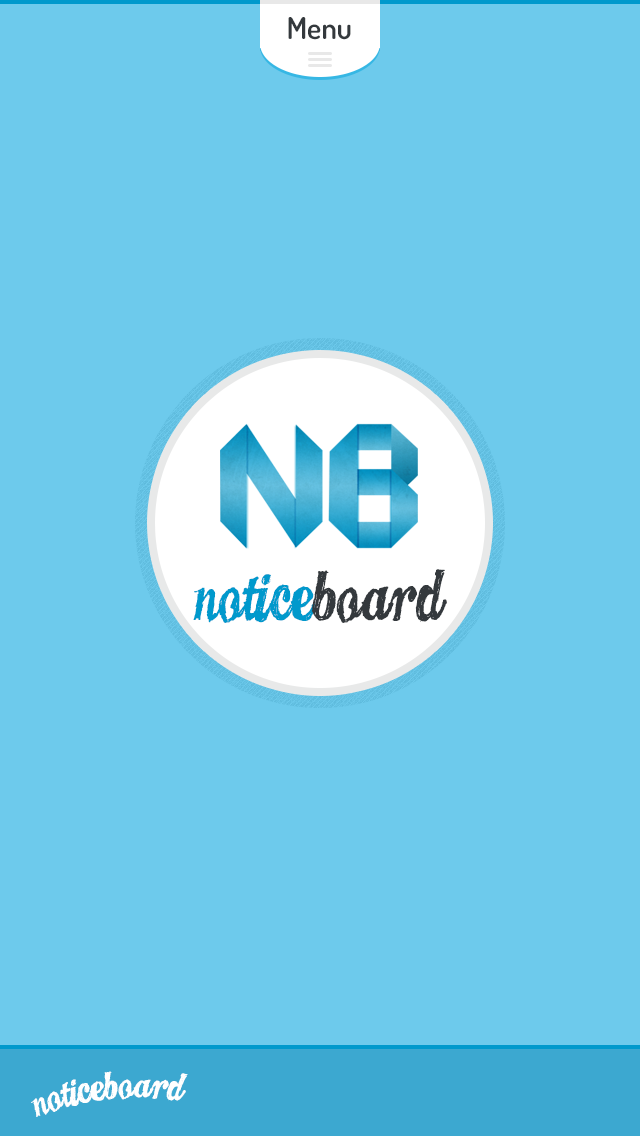
<style>
.page{position:relative;width:640px;height:1136px;background:#6dcaec}
.page>*{position:absolute;margin:0}
.t1{font:30px "Dosis-SemiBold";color:#34393d}
.t2{font:107px "CANDYINC";color:#0099cc}
.t3{font:107px "CANDYINC";color:#34393d}
.t4{font:58.9px "CANDYINC";color:#ffffff}
</style>
<div class="page">
<p class="t1" style="left:288px;top:17px;width:63px;height:23px">Menu</p>
<p class="t2" style="left:193px;top:569px;width:254px;height:54px">Notice<span class="t3">Board</span></p>
<p class="t4" style="left:31px;top:1071px;width:157px;height:46px;rotate:-6deg">NoticeBoard</p>
</div>
